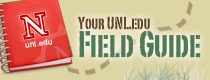
<style>
.page{position:relative;width:210px;height:80px;background:#ded5a4}
.page>*{position:absolute;margin:0}
.t1{font:17px/28px "PortagoITCTT";color:#62462a}
.t2{font:36px/28px "PortagoITCTT";color:#4f7a53}
.t3{font:7.8px "Helvetica-Bold";color:#ffffff}
</style>
<div class="page">
<p class="t1" style="left:78px;top:16px;width:123px;height:42px">Your UNL.edu <br><span class="t2">Field Guide</span></p>
<p class="t3" style="left:25px;top:38px;width:28px;height:10px;rotate:-8deg">unl.edu</p>
</div>
